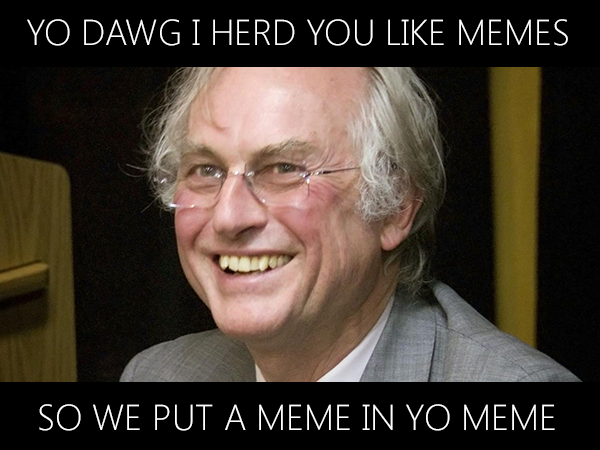
<style>
.page{position:relative;width:600px;height:450px;background:#000000}
.page>*{position:absolute;margin:0}
.t1{font:36px "SegoeUI-Light";color:#ffffff}
</style>
<div class="page">
<p class="t1" style="left:27px;top:19px;width:541px;height:27px">YO DAWG I HERD YOU LIKE MEMES</p>
<p class="t1" style="left:39px;top:404px;width:516px;height:27px">SO WE PUT A MEME IN YO MEME</p>
</div>
